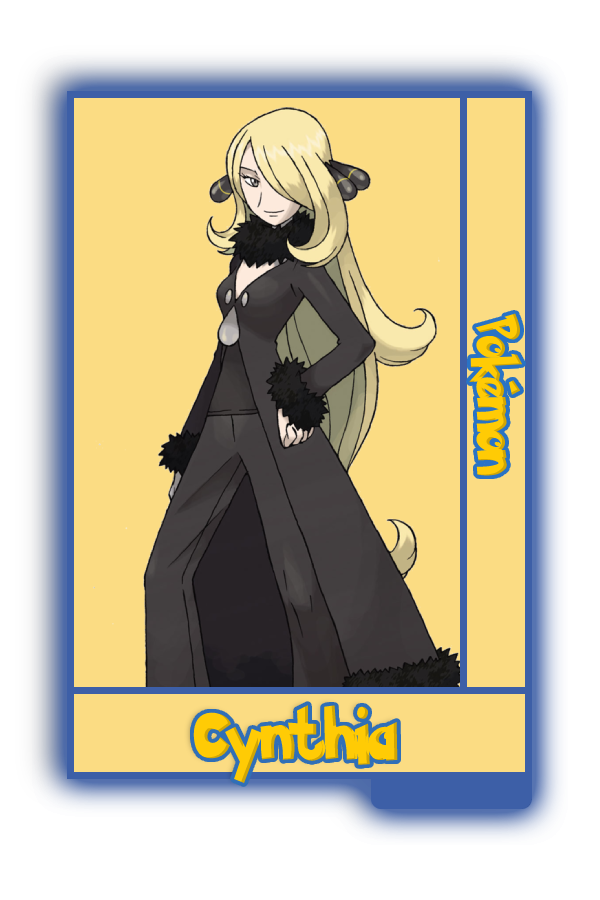
<style>
.page{position:relative;width:600px;height:900px;background:#fbdc83}
.page>*{position:absolute;margin:0}
.t1{font:48.8px "PokemonSolidNormal";color:#ffcb05;scale:0.8 1}
.t2{font:56.6px "PokemonSolidNormal";color:#ffcb05;scale:0.92 1}
</style>
<div class="page">
<p class="t1" style="left:469px;top:313px;width:54px;height:163px;rotate:90deg">Pokémon</p>
<p class="t2" style="left:193px;top:705px;width:205px;height:78px">Cynthia</p>
</div>
